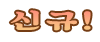
<style>
.page{position:relative;width:100px;height:42px;background:#ffffff}
.page>*{position:absolute;margin:0}
.t1{font:21.9px "SDKukdetopokki-bBd";letter-spacing:0.12em;color:#fbac7f;scale:1.57 1}
</style>
<div class="page">
<p class="t1" style="left:10px;top:10px;width:81px;height:21px">신규!</p>
</div>
